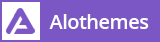
<style>
.page{position:relative;width:160px;height:42px;background:#7b56c5}
.page>*{position:absolute;margin:0}
.t1{font:20px "OpenSans-SemiBold";letter-spacing:-0.025em;color:#ffffff}
</style>
<div class="page">
<p class="t1" style="left:49px;top:14px;width:100px;height:15px">Alothemes</p>
</div>
